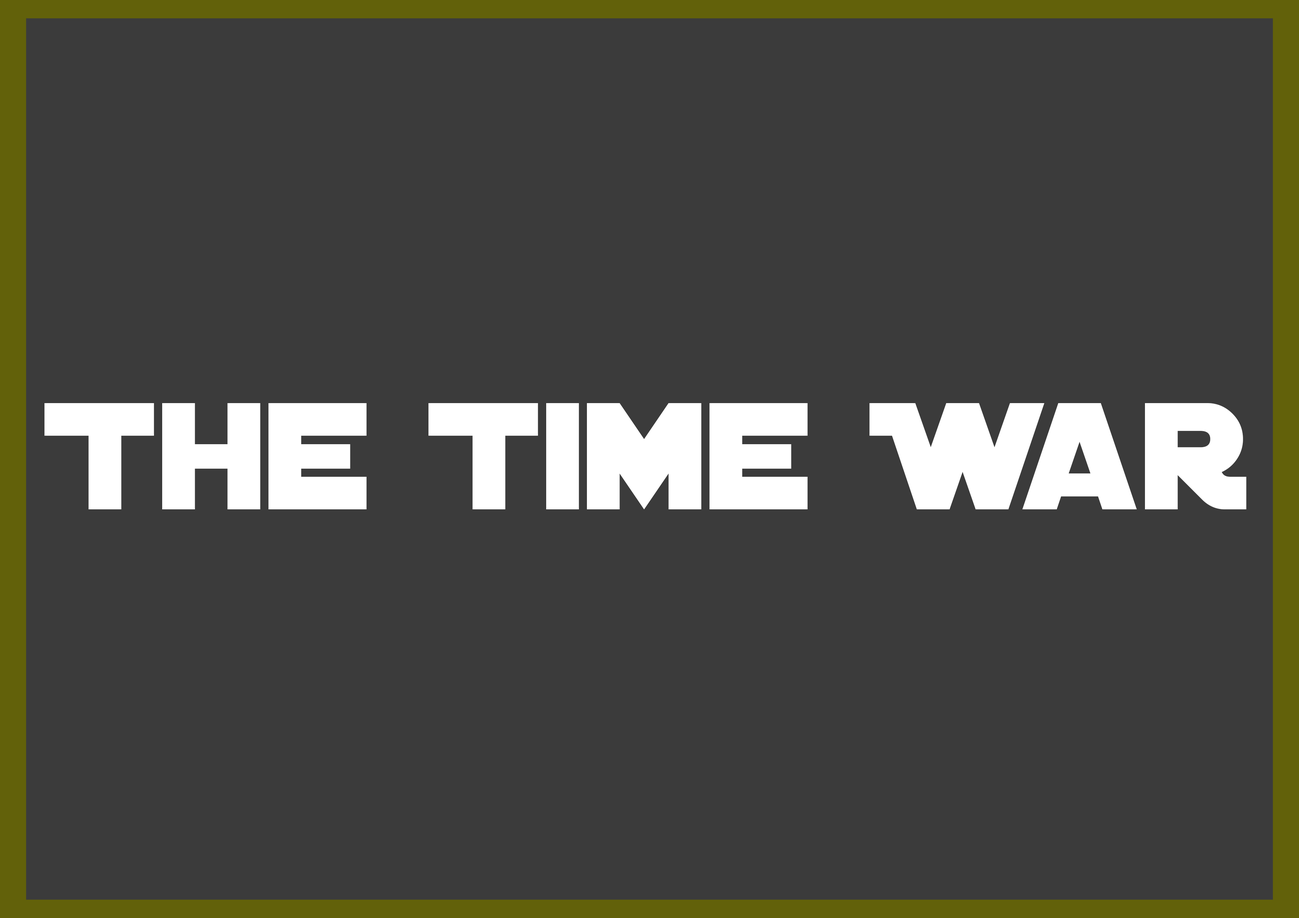
<style>
.page{position:relative;width:1299px;height:918px;background:#3b3b3b}
.page>*{position:absolute;margin:0}
.t1{font:39.2px "DistantGalaxy";color:#ffffff}
</style>
<div class="page">
<p class="t1" style="left:44px;top:403px;width:1202px;height:106px">The Time War</p>
</div>
